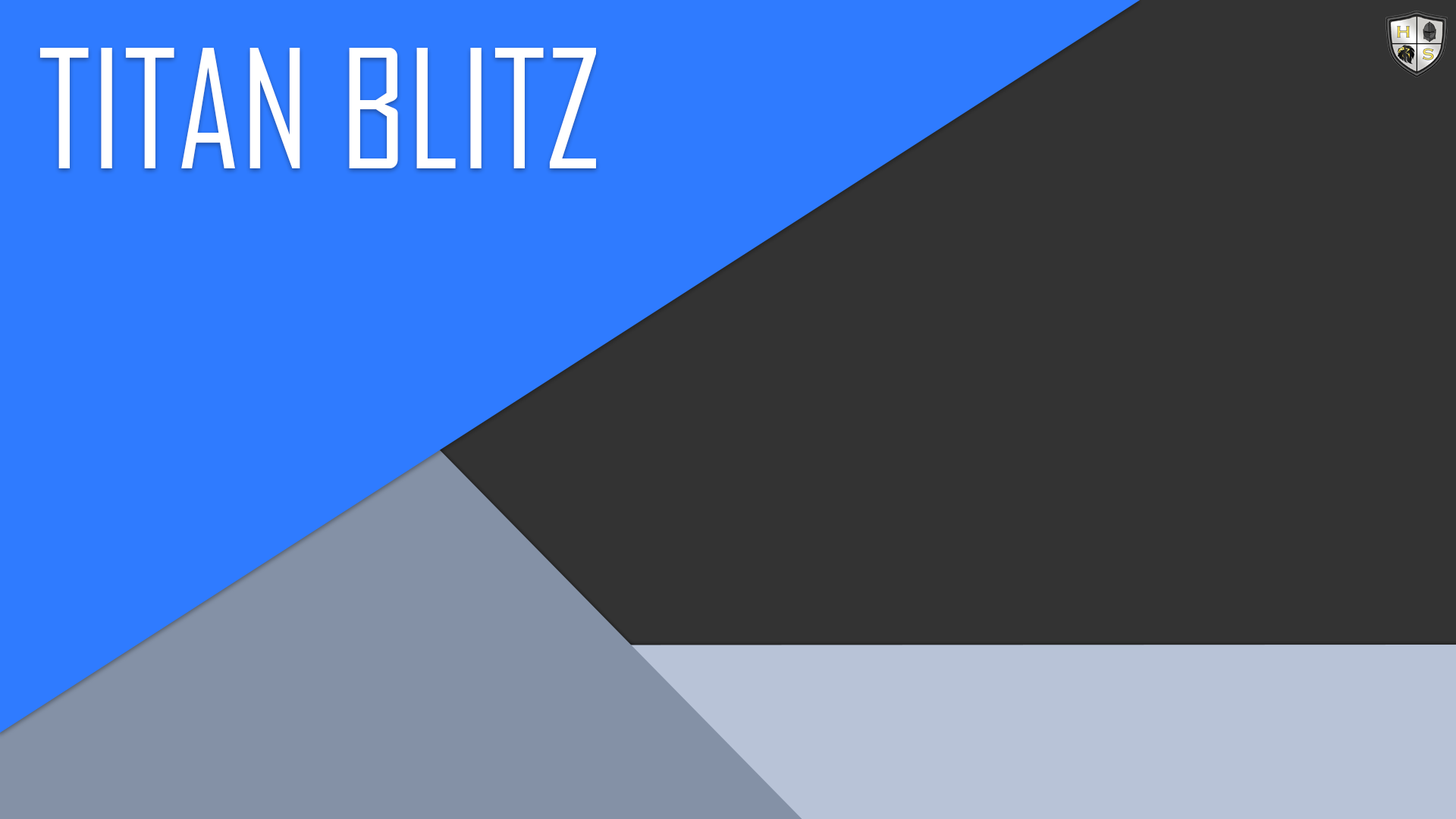
<style>
.page{position:relative;width:1456px;height:819px;background:#333333}
.page>*{position:absolute;margin:0}
.t1{font:158px "AgencyFB-Reg";color:#ffffff}
</style>
<div class="page">
<p class="t1" style="left:39px;top:48px;width:557px;height:120px">TITAN BLITZ</p>
</div>
